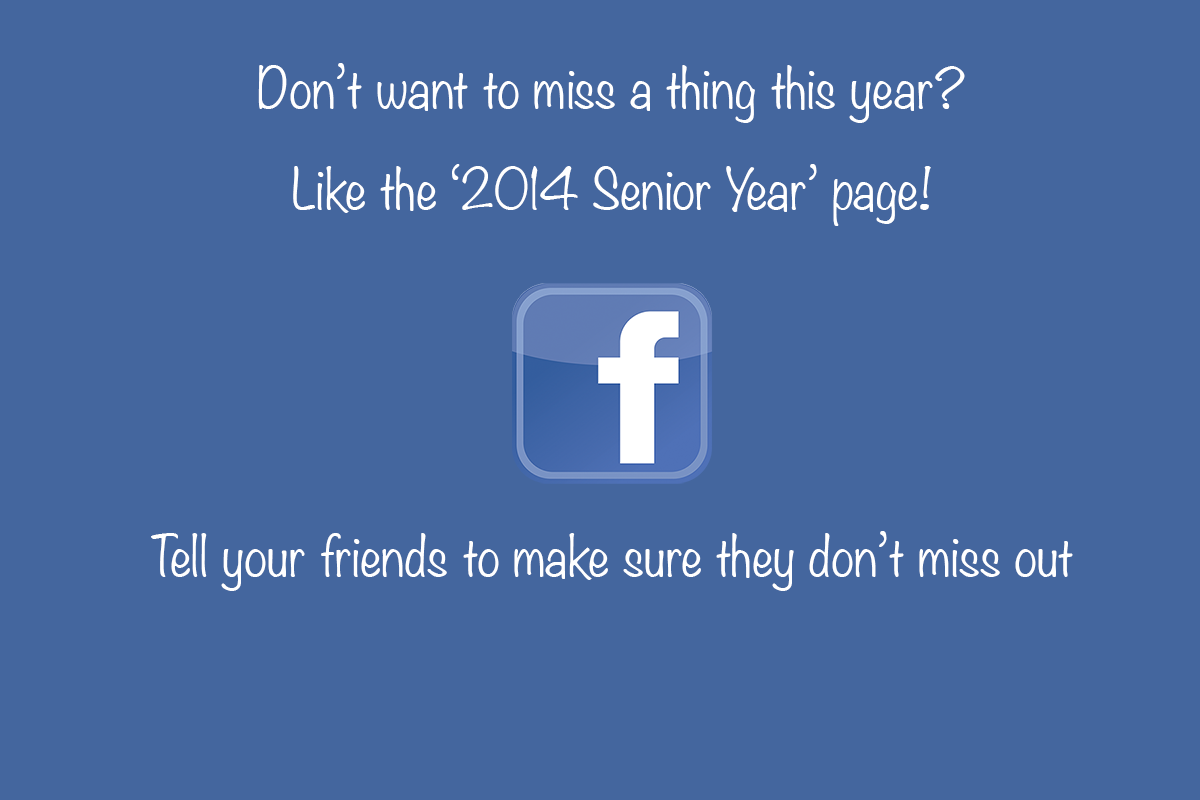
<style>
.page{position:relative;width:1200px;height:800px;background:#44669e}
.page>*{position:absolute;margin:0}
.t1{font:50px "Noteworthy-Light";color:#ffffff}
</style>
<div class="page">
<p class="t1" style="left:258px;top:63px;width:707px;height:60px">Don’t want to miss a thing this year?</p>
<p class="t1" style="left:293px;top:164px;width:638px;height:62px">Like the ‘2014 Senior Year’ page!</p>
<p class="t1" style="left:151px;top:531px;width:922px;height:60px">Tell your friends to make sure they don’t miss out</p>
</div>
